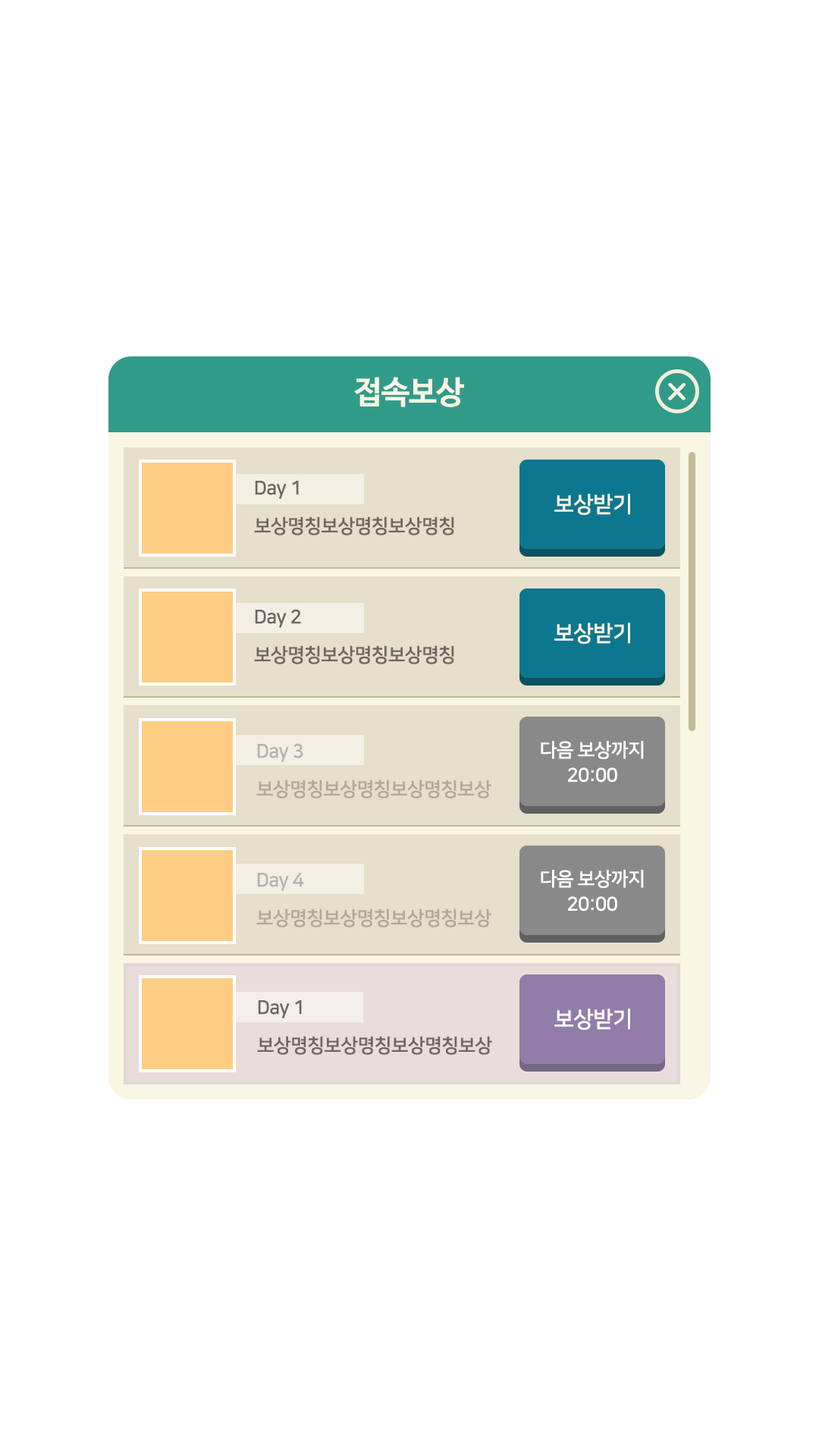
<style>
.page{position:relative;width:819px;height:1456px;background:#ffffff}
.page>*{position:absolute;margin:0}
.t1{font:31.6px "NanumBarunGothicBold";letter-spacing:-0.025em;color:#faf6e4}
.t2{font:30.3px "DXLBaB-KSCpc-EUC-H";letter-spacing:-0.025em;color:#faf6e4;scale:1.3 1}
.t3{font:19px/37.9px "NanumSquareOTFB";letter-spacing:-0.025em;color:#6e6664}
.t4{font:22.1px "NanumSquareOTFB";letter-spacing:-0.025em;color:#faf6e4}
.t5{font:19px/37.9px "NanumSquareOTFB";letter-spacing:-0.025em;color:#b0a99d}
.t6{font:19px/25.3px "NanumSquareOTFB";letter-spacing:-0.025em;color:#ffffff}
.t7{font:22.1px "NanumSquareOTFB";letter-spacing:-0.025em;color:#ffffff}
</style>
<div class="page">
<p class="t1" style="left:354px;top:377px;width:110px;height:30px">접속보상</p>
<p class="t2" style="left:668px;top:383px;width:18px;height:17px">x</p>
<p class="t3" style="left:254px;top:481px;width:200px;height:54px">Day 1<br>보상명칭보상명칭보상명칭</p>
<p class="t4" style="left:554px;top:494px;width:76px;height:21px">보상받기</p>
<p class="t3" style="left:254px;top:609px;width:200px;height:55px">Day 2<br>보상명칭보상명칭보상명칭</p>
<p class="t4" style="left:554px;top:623px;width:76px;height:21px">보상받기</p>
<p class="t5" style="left:256px;top:743px;width:235px;height:56px">Day 3<br>보상명칭보상명칭보상명칭보상</p>
<p class="t6" style="left:541px;top:741px;width:103px;height:42px;text-align:center">다음 보상까지<br>20:00</p>
<p class="t6" style="left:541px;top:870px;width:103px;height:42px;text-align:center">다음 보상까지<br>20:00</p>
<p class="t5" style="left:256px;top:873px;width:235px;height:54px">Day 4<br>보상명칭보상명칭보상명칭보상</p>
<p class="t3" style="left:257px;top:1000px;width:235px;height:55px">Day 1<br>보상명칭보상명칭보상명칭보상</p>
<p class="t7" style="left:554px;top:1009px;width:76px;height:21px">보상받기</p>
</div>
